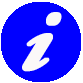
<style>
.page{position:relative;width:83px;height:83px;background:#0000ff}
.page>*{position:absolute;margin:0}
.t1{font:90px "AGaramondPro-BoldItalic";color:#fbf8f8;font-weight:bold;font-style:italic}
</style>
<div class="page">
<p class="t1" style="left:22px;top:12px;width:40px;height:60px">i</p>
</div>
